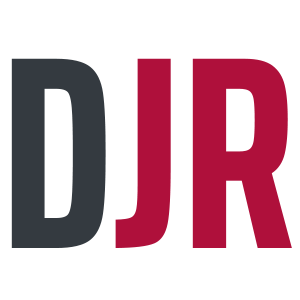
<style>
.page{position:relative;width:300px;height:300px;background:#ffffff}
.page>*{position:absolute;margin:0}
.t1{font:275px "SairaExtraCondensed-Bold";color:#343a40}
.t2{font:275px "SairaExtraCondensed-Bold";color:#af103b}
</style>
<div class="page">
<p class="t1" style="left:11px;top:58px;width:95px;height:190px">D</p>
<p class="t2" style="left:115px;top:58px;width:177px;height:190px">JR</p>
</div>
